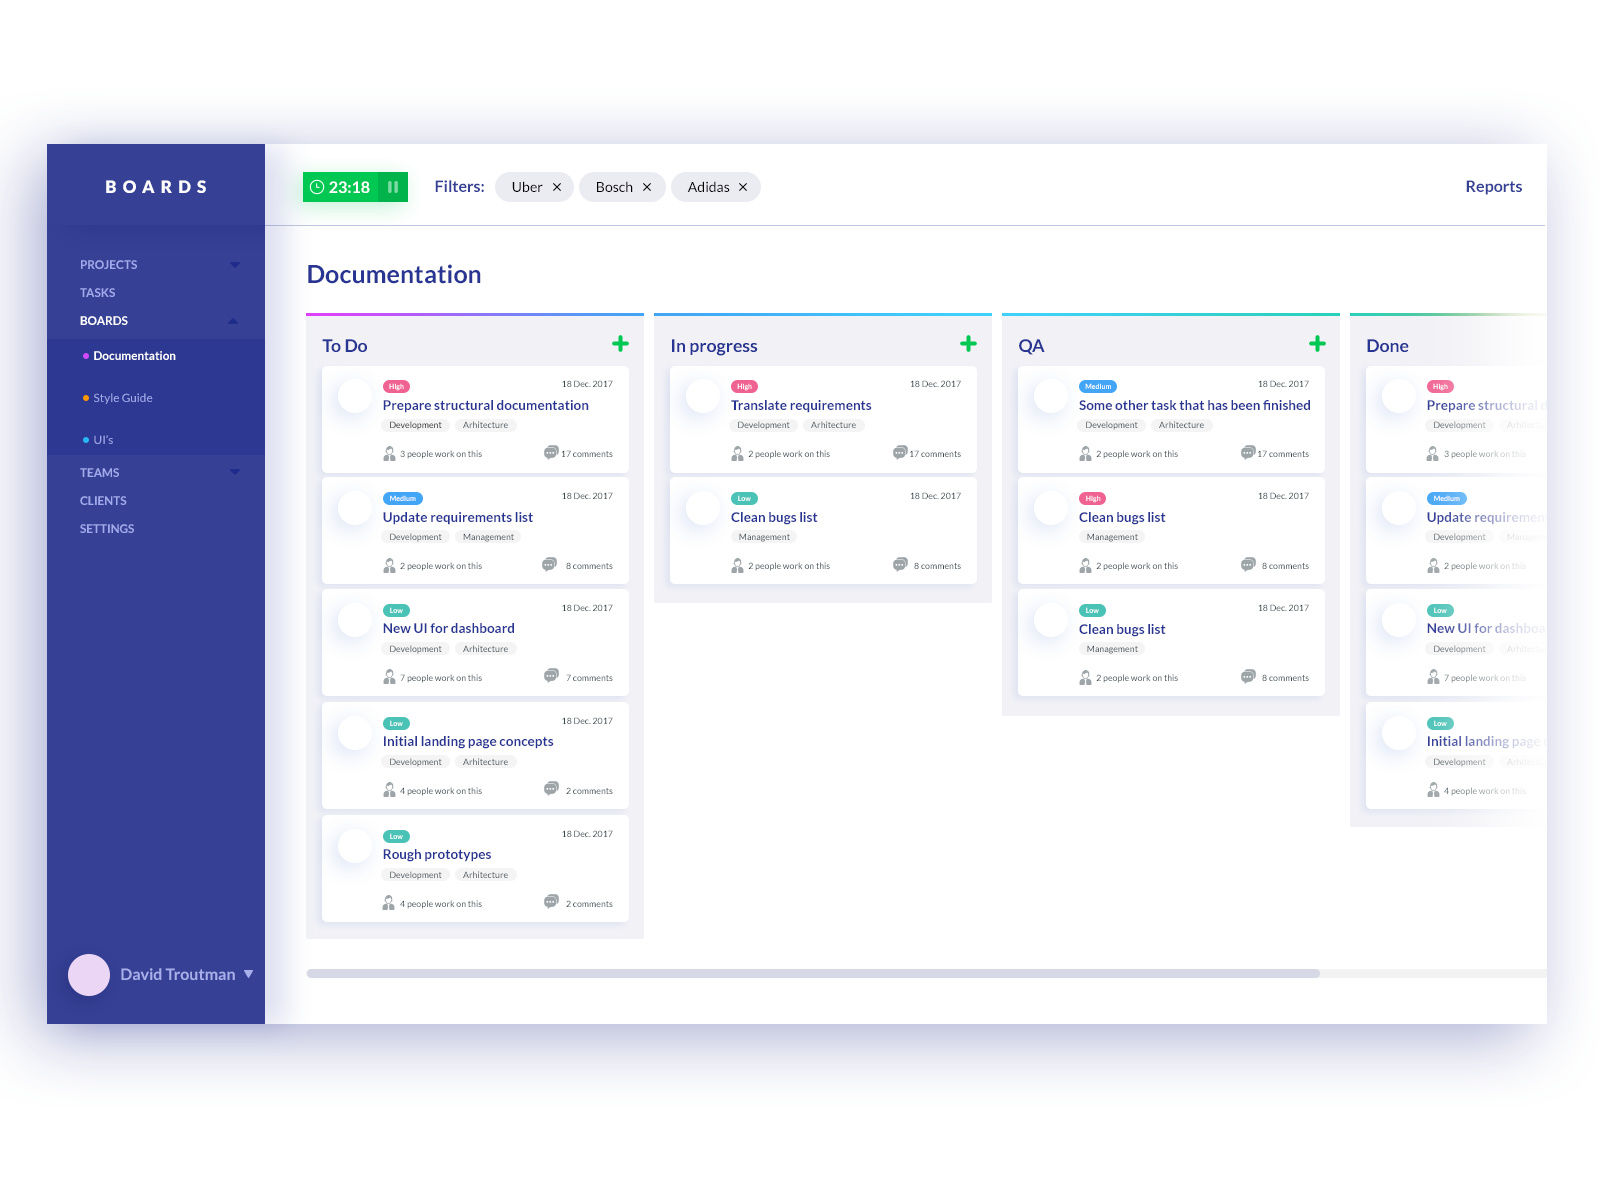
<style>
.page{position:relative;width:1600px;height:1200px;background:#ffffff}
.page>*{position:absolute;margin:0}
.t1{font:17.1px "Lato-Black";letter-spacing:0.36em;color:#ffffff;text-transform:uppercase}
.t2{font:16px "Lato-Bold";color:#ffffff}
.t3{font:16px "Lato-Bold";color:#364196}
.t4{font:14px "Lato-Regular";color:#000000}
.t5{font:11.8px/28px "Lato-Bold";color:#a1aaec;text-transform:uppercase}
.t6{font:11.8px/28px "Lato-Bold";color:#ffffff;text-transform:uppercase}
.t7{font:25px "Lato-Bold";color:#283593}
.t8{font:17.7px "Lato-Bold";color:#283593}
.t9{font:11.8px/42px "Lato-Regular";color:#a1aaec}
.t10{font:11.8px/42px "Lato-Bold";color:#ffffff}
.t11{font:7.1px "Lato-Bold";color:#ffffff}
.t12{font:8.8px "Lato-Regular";color:#37474f}
.t13{font:13.5px "Lato-Bold";color:#283593}
.t14{font:8.8px "Lato-Regular"}
.t15{font:7.1px "Lato-Bold"}
.t16{font:13.5px "Lato-Bold"}
.t17{font:8.8px "Lato-Regular";color:#515f66}
.t18{font:16px "Lato-Bold";color:#a8afeb}
</style>
<div class="page">
<p class="t1" style="left:106px;top:180px;width:100px;height:13px">Boards</p>
<p class="t2" style="left:329px;top:181px;width:41px;height:12px">23:18</p>
<p class="t3" style="left:435px;top:180px;width:49px;height:12px">Filters:</p>
<p class="t4" style="left:512px;top:181px;width:31px;height:11px">Uber</p>
<p class="t4" style="left:597px;top:181px;width:36px;height:11px">Bosch</p>
<p class="t4" style="left:687px;top:181px;width:43px;height:11px">Adidas</p>
<p class="t3" style="left:1466px;top:180px;width:56px;height:15px">Reports</p>
<p class="t5" style="left:80px;top:260px;width:57px;height:273px">Projects<br>Tasks<br><span class="t6">Boards<br><br><br><br><br><br></span>Teams<br>clients<br>Settings</p>
<p class="t7" style="left:308px;top:264px;width:173px;height:20px">Documentation</p>
<p class="t8" style="left:322px;top:339px;width:45px;height:13px">To Do</p>
<p class="t8" style="left:672px;top:339px;width:86px;height:17px">In progress</p>
<p class="t8" style="left:1019px;top:339px;width:26px;height:16px">QA</p>
<p class="t8" style="left:1367px;top:339px;width:42px;height:13px">Done</p>
<p class="t9" style="left:94px;top:351px;width:82px;height:93px"><span class="t10">Documentation<br></span>Style Guide<br>UI’s</p>
<p class="t11" style="left:389px;top:383px;width:15px;height:8px">High</p>
<p class="t12" style="left:562px;top:380px;width:51px;height:7px">18 Dec. 2017</p>
<p class="t11" style="left:737px;top:383px;width:15px;height:8px">High</p>
<p class="t12" style="left:910px;top:380px;width:51px;height:7px">18 Dec. 2017</p>
<p class="t11" style="left:1085px;top:383px;width:26px;height:6px">Medium</p>
<p class="t12" style="left:1258px;top:380px;width:51px;height:7px">18 Dec. 2017</p>
<p class="t11" style="left:1433px;top:383px;width:15px;height:8px">High</p>
<p class="t13" style="left:383px;top:400px;width:206px;height:13px">Prepare structural documentation</p>
<p class="t13" style="left:731px;top:400px;width:141px;height:13px">Translate requirements</p>
<p class="t13" style="left:1079px;top:400px;width:231px;height:10px">Some other task that has been finished</p>
<p class="t14" style="left:390px;top:421px;width:52px;height:9px">Development</p>
<p class="t14" style="left:463px;top:421px;width:45px;height:7px">Arhitecture</p>
<p class="t14" style="left:738px;top:421px;width:52px;height:9px">Development</p>
<p class="t14" style="left:811px;top:421px;width:45px;height:7px">Arhitecture</p>
<p class="t14" style="left:1086px;top:421px;width:52px;height:9px">Development</p>
<p class="t14" style="left:1159px;top:421px;width:45px;height:7px">Arhitecture</p>
<p class="t14" style="left:1434px;top:421px;width:52px;height:9px">Development</p>
<p class="t14" style="left:1507px;top:421px;width:45px;height:7px">Arhitecture</p>
<p class="t12" style="left:400px;top:450px;width:82px;height:9px">3 people work on this</p>
<p class="t12" style="left:561px;top:450px;width:52px;height:7px">17 comments</p>
<p class="t12" style="left:748px;top:450px;width:82px;height:9px">2 people work on this</p>
<p class="t12" style="left:910px;top:450px;width:51px;height:7px">17 comments</p>
<p class="t12" style="left:1096px;top:450px;width:82px;height:9px">2 people work on this</p>
<p class="t12" style="left:1258px;top:450px;width:51px;height:7px">17 comments</p>
<p class="t14" style="left:1444px;top:450px;width:82px;height:9px">3 people work on this</p>
<p class="t15" style="left:390px;top:495px;width:26px;height:6px">Medium</p>
<p class="t12" style="left:562px;top:492px;width:51px;height:7px">18 Dec. 2017</p>
<p class="t11" style="left:738px;top:495px;width:13px;height:6px">Low</p>
<p class="t12" style="left:910px;top:492px;width:51px;height:7px">18 Dec. 2017</p>
<p class="t15" style="left:1086px;top:495px;width:15px;height:8px">High</p>
<p class="t12" style="left:1258px;top:492px;width:51px;height:7px">18 Dec. 2017</p>
<p class="t15" style="left:1434px;top:495px;width:26px;height:6px">Medium</p>
<p class="t13" style="left:383px;top:512px;width:150px;height:13px">Update requirements list</p>
<p class="t13" style="left:731px;top:512px;width:87px;height:13px">Clean bugs list</p>
<p class="t13" style="left:1079px;top:512px;width:87px;height:13px">Clean bugs list</p>
<p class="t16" style="left:1427px;top:512px;width:150px;height:13px">Update requirements list</p>
<p class="t14" style="left:390px;top:533px;width:52px;height:9px">Development</p>
<p class="t12" style="left:463px;top:533px;width:51px;height:9px">Management</p>
<p class="t12" style="left:739px;top:533px;width:51px;height:9px">Management</p>
<p class="t12" style="left:1087px;top:533px;width:51px;height:9px">Management</p>
<p class="t14" style="left:1434px;top:533px;width:52px;height:9px">Development</p>
<p class="t14" style="left:1507px;top:533px;width:51px;height:9px">Management</p>
<p class="t12" style="left:400px;top:562px;width:82px;height:9px">2 people work on this</p>
<p class="t14" style="left:566px;top:562px;width:47px;height:7px">8 comments</p>
<p class="t12" style="left:748px;top:562px;width:82px;height:9px">2 people work on this</p>
<p class="t12" style="left:914px;top:562px;width:47px;height:7px">8 comments</p>
<p class="t12" style="left:1096px;top:562px;width:82px;height:9px">2 people work on this</p>
<p class="t12" style="left:1262px;top:562px;width:47px;height:7px">8 comments</p>
<p class="t14" style="left:1444px;top:562px;width:82px;height:9px">2 people work on this</p>
<p class="t12" style="left:562px;top:604px;width:51px;height:7px">18 Dec. 2017</p>
<p class="t12" style="left:1258px;top:604px;width:51px;height:7px">18 Dec. 2017</p>
<p class="t11" style="left:390px;top:607px;width:13px;height:6px">Low</p>
<p class="t11" style="left:1086px;top:607px;width:13px;height:6px">Low</p>
<p class="t11" style="left:1434px;top:607px;width:13px;height:6px">Low</p>
<p class="t13" style="left:383px;top:623px;width:131px;height:10px">New UI for dashboard</p>
<p class="t13" style="left:1079px;top:624px;width:87px;height:13px">Clean bugs list</p>
<p class="t16" style="left:1427px;top:623px;width:131px;height:10px">New UI for dashboard</p>
<p class="t14" style="left:390px;top:645px;width:52px;height:9px">Development</p>
<p class="t14" style="left:463px;top:645px;width:45px;height:7px">Arhitecture</p>
<p class="t12" style="left:1087px;top:645px;width:51px;height:9px">Management</p>
<p class="t14" style="left:1434px;top:645px;width:52px;height:9px">Development</p>
<p class="t14" style="left:1507px;top:645px;width:45px;height:7px">Arhitecture</p>
<p class="t12" style="left:400px;top:674px;width:82px;height:9px">7 people work on this</p>
<p class="t14" style="left:566px;top:674px;width:47px;height:7px">7 comments</p>
<p class="t12" style="left:1096px;top:674px;width:82px;height:9px">2 people work on this</p>
<p class="t12" style="left:1262px;top:674px;width:47px;height:7px">8 comments</p>
<p class="t14" style="left:1444px;top:674px;width:82px;height:9px">7 people work on this</p>
<p class="t11" style="left:390px;top:720px;width:13px;height:6px">Low</p>
<p class="t12" style="left:562px;top:717px;width:51px;height:7px">18 Dec. 2017</p>
<p class="t11" style="left:1434px;top:720px;width:13px;height:6px">Low</p>
<p class="t13" style="left:384px;top:736px;width:170px;height:13px">Initial landing page concepts</p>
<p class="t16" style="left:1428px;top:736px;width:170px;height:13px">Initial landing page concepts</p>
<p class="t14" style="left:390px;top:758px;width:52px;height:9px">Development</p>
<p class="t14" style="left:463px;top:758px;width:45px;height:7px">Arhitecture</p>
<p class="t14" style="left:1434px;top:758px;width:52px;height:9px">Development</p>
<p class="t14" style="left:1507px;top:758px;width:45px;height:7px">Arhitecture</p>
<p class="t12" style="left:400px;top:787px;width:82px;height:9px">4 people work on this</p>
<p class="t12" style="left:566px;top:787px;width:47px;height:7px">2 comments</p>
<p class="t17" style="left:1444px;top:787px;width:82px;height:9px">4 people work on this</p>
<p class="t11" style="left:390px;top:833px;width:13px;height:6px">Low</p>
<p class="t12" style="left:562px;top:830px;width:51px;height:7px">18 Dec. 2017</p>
<p class="t13" style="left:383px;top:849px;width:108px;height:13px">Rough prototypes</p>
<p class="t14" style="left:390px;top:871px;width:52px;height:9px">Development</p>
<p class="t14" style="left:463px;top:871px;width:45px;height:7px">Arhitecture</p>
<p class="t12" style="left:400px;top:900px;width:82px;height:9px">4 people work on this</p>
<p class="t12" style="left:566px;top:900px;width:47px;height:7px">2 comments</p>
<p class="t18" style="left:121px;top:968px;width:114px;height:12px">David Troutman</p>
</div>
